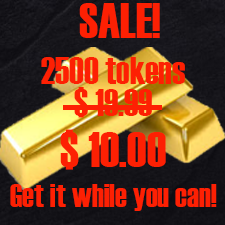
<style>
.page{position:relative;width:225px;height:225px}
.page>*{position:absolute;margin:0}
.t1{font:50px "Haettenschweiler";color:#fd2003}
.t2{font:37.5px "Haettenschweiler";color:#fd2003}
.t3{font:33.3px "Haettenschweiler";color:#fd2003}
</style>
<div class="page">
<p class="t1" style="left:79px;top:3px;width:81px;height:35px">SALE!</p>
<p class="t2" style="left:41px;top:57px;width:144px;height:27px">2500 tokens</p>
<p class="t2" style="left:74px;top:87px;width:78px;height:31px">$ 19.99</p>
<p class="t1" style="left:60px;top:129px;width:106px;height:41px">$ 10.00</p>
<p class="t3" style="left:10px;top:184px;width:207px;height:27px">Get it while you can!</p>
</div>
